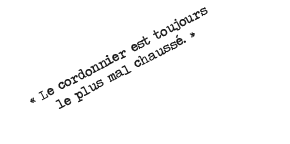
<style>
.page{position:relative;width:290px;height:144px;background:#ffffff}
.page>*{position:absolute;margin:0}
.t1{font:13.2px "TravelingTypewriter";color:#1b1b1b}
</style>
<div class="page">
<p class="t1" style="left:30px;top:7px;width:178px;height:102px;text-align:center;rotate:-28deg">« Le cordonnier est toujours<br>le plus mal chaussé. »</p>
</div>
